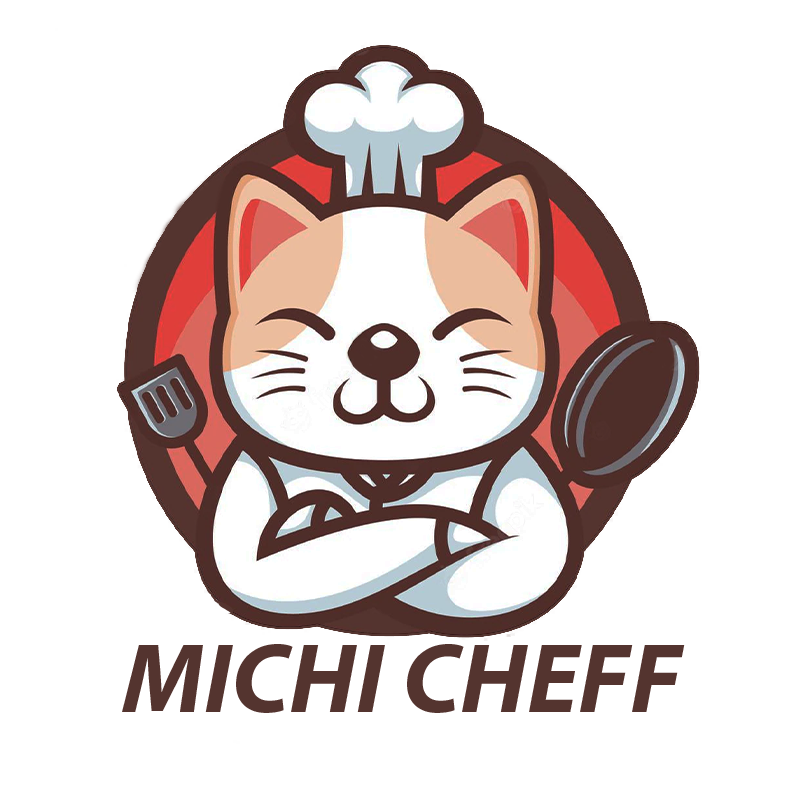
<style>
.page{position:relative;width:800px;height:800px;background:#ffffff}
.page>*{position:absolute;margin:0}
.t1{font:100px "MyriadPro-BoldIt";color:#54342f}
</style>
<div class="page">
<p class="t1" style="left:122px;top:644px;width:563px;height:69px">MICHI CHEFF</p>
</div>
